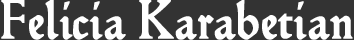
<style>
.page{position:relative;width:354px;height:40px;background:#333333}
.page>*{position:absolute;margin:0}
.t1{font:54.2px "Hamlet-Tertia18";color:#ffffff;font-weight:bold}
</style>
<div class="page">
<p class="t1" style="left:1px;top:0px;width:352px;height:40px">Felicia Karabetian</p>
</div>
